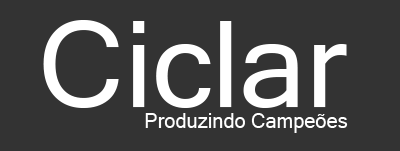
<style>
.page{position:relative;width:400px;height:151px;background:#333333}
.page>*{position:absolute;margin:0}
.t1{font:120px "MicrosoftSansSerif";color:#ffffff}
.t2{font:20px "MicrosoftSansSerif";color:#ffffff}
</style>
<div class="page">
<p class="t1" style="left:43px;top:20px;width:304px;height:88px">Ciclar</p>
<p class="t2" style="left:145px;top:113px;width:203px;height:20px">Produzindo Campeões</p>
</div>
